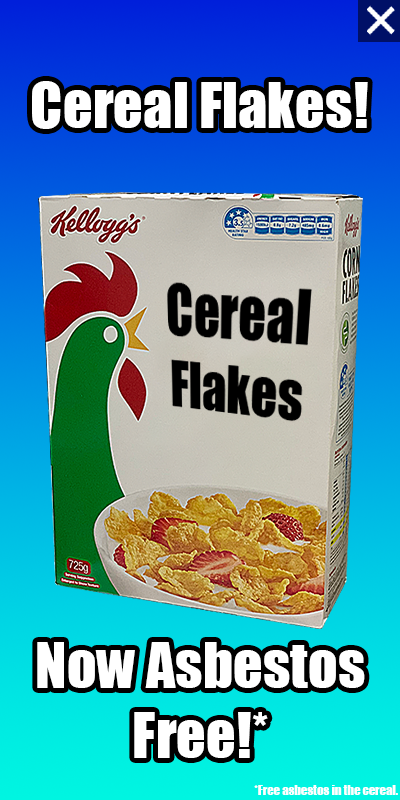
<style>
.page{position:relative;width:400px;height:800px}
.page>*{position:absolute;margin:0}
.t1{font:58.3px "Impact";color:#ffffff}
.t2{font:12.5px "Impact";color:#ffffff}
</style>
<div class="page">
<p class="t1" style="left:32px;top:81px;width:336px;height:48px">Cereal Flakes!</p>
<p class="t1" style="left:37px;top:642px;width:328px;height:116px;text-align:center">Now Asbestos<br>Free!*</p>
<p class="t2" style="left:254px;top:785px;width:144px;height:10px">*Free asbestos in the cereal.</p>
</div>
